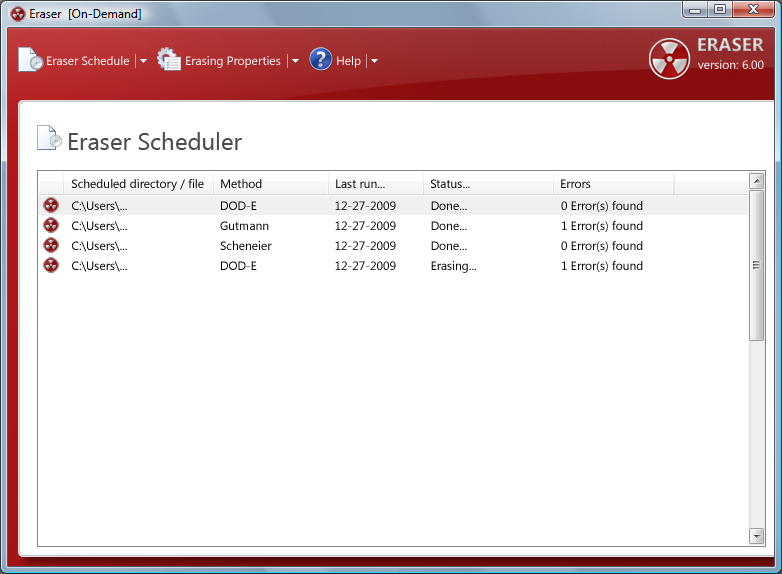
<style>
.page{position:relative;width:782px;height:574px;background:#ffffff}
.page>*{position:absolute;margin:0}
.t1{font:18.4px "SegoeUI-Bold"}
.t2{font:12px "SegoeUI";color:#ffffff}
.t3{font:24px "SegoeUI";color:#4c4c4c}
.t4{font:12px "SegoeUI";color:#000000}
</style>
<div class="page">
<p class="t1" style="left:698px;top:37px;width:66px;height:15px">ERASER</p>
<p class="t2" style="left:47px;top:56px;width:82px;height:9px">Eraser Schedule</p>
<p class="t2" style="left:186px;top:56px;width:95px;height:12px">Erasing Properties</p>
<p class="t2" style="left:337px;top:56px;width:24px;height:12px">Help</p>
<p class="t2" style="left:698px;top:60px;width:66px;height:9px">version: 6.00</p>
<p class="t3" style="left:69px;top:132px;width:173px;height:18px">Eraser Scheduler</p>
<p class="t4" style="left:72px;top:179px;width:132px;height:12px">Scheduled directory / file</p>
<p class="t4" style="left:221px;top:179px;width:41px;height:9px">Method</p>
<p class="t4" style="left:336px;top:179px;width:49px;height:9px">Last run...</p>
<p class="t4" style="left:431px;top:179px;width:39px;height:9px">Status...</p>
<p class="t4" style="left:561px;top:179px;width:30px;height:9px">Errors</p>
<p class="t4" style="left:72px;top:201px;width:55px;height:11px">C:\Users\...</p>
<p class="t4" style="left:221px;top:201px;width:36px;height:9px">DOD-E</p>
<p class="t4" style="left:335px;top:201px;width:61px;height:9px">12-27-2009</p>
<p class="t4" style="left:431px;top:201px;width:36px;height:9px">Done...</p>
<p class="t4" style="left:561px;top:201px;width:82px;height:11px">0 Error(s) found</p>
<p class="t4" style="left:72px;top:221px;width:55px;height:11px">C:\Users\...</p>
<p class="t4" style="left:220px;top:221px;width:49px;height:9px">Gutmann</p>
<p class="t4" style="left:335px;top:221px;width:61px;height:9px">12-27-2009</p>
<p class="t4" style="left:431px;top:221px;width:36px;height:9px">Done...</p>
<p class="t4" style="left:562px;top:221px;width:81px;height:11px">1 Error(s) found</p>
<p class="t4" style="left:72px;top:241px;width:55px;height:11px">C:\Users\...</p>
<p class="t4" style="left:220px;top:241px;width:52px;height:9px">Scheneier</p>
<p class="t4" style="left:335px;top:241px;width:61px;height:9px">12-27-2009</p>
<p class="t4" style="left:431px;top:241px;width:36px;height:9px">Done...</p>
<p class="t4" style="left:561px;top:241px;width:82px;height:11px">0 Error(s) found</p>
<p class="t4" style="left:72px;top:261px;width:55px;height:11px">C:\Users\...</p>
<p class="t4" style="left:221px;top:261px;width:36px;height:9px">DOD-E</p>
<p class="t4" style="left:335px;top:261px;width:61px;height:9px">12-27-2009</p>
<p class="t4" style="left:431px;top:261px;width:45px;height:12px">Erasing...</p>
<p class="t4" style="left:562px;top:261px;width:81px;height:11px">1 Error(s) found</p>
</div>
